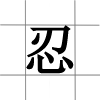
<style>
.page{position:relative;width:100px;height:100px;background:#ffffff}
.page>*{position:absolute;margin:0}
.t1{font:55px "SimSun";color:#000000;font-weight:bold}
</style>
<div class="page">
<p class="t1" style="left:26px;top:25px;width:48px;height:49px">忍</p>
</div>
